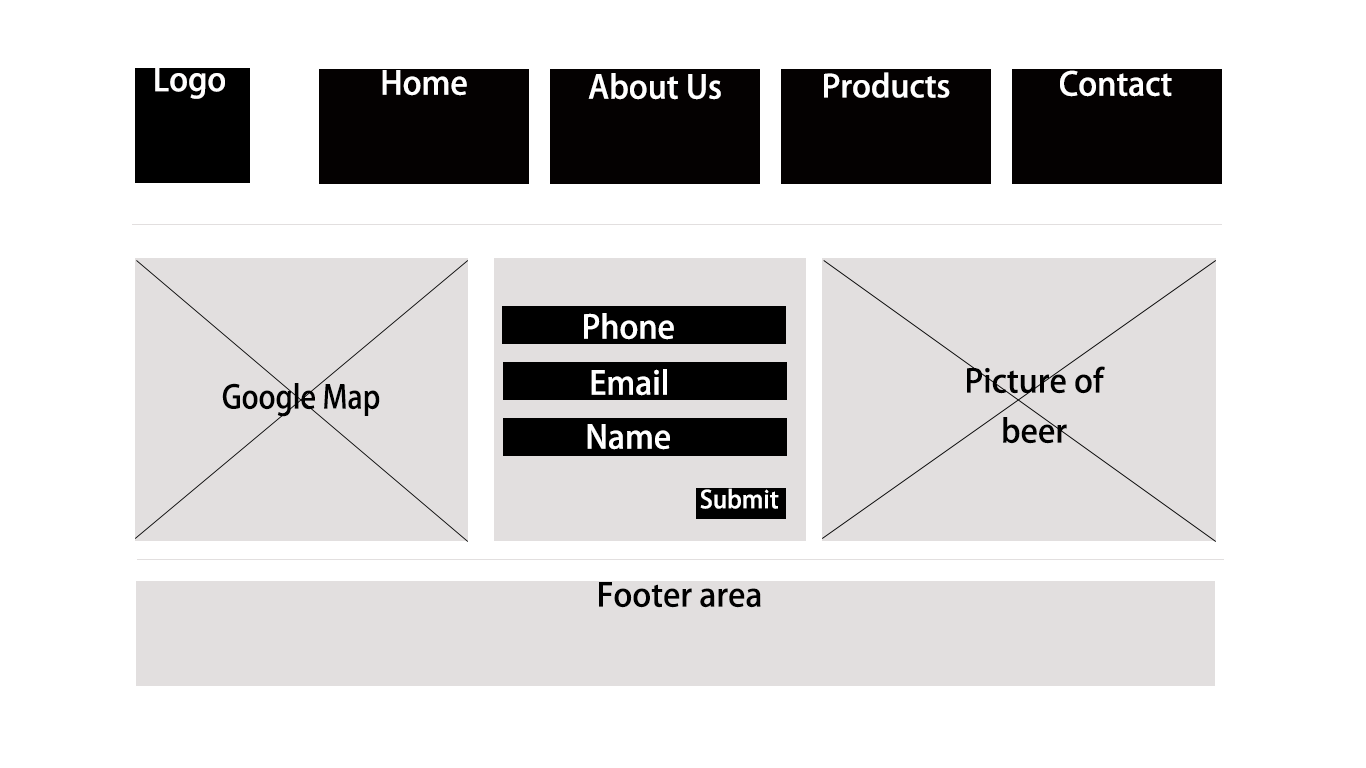
<style>
.page{position:relative;width:1366px;height:768px;background:#ffffff}
.page>*{position:absolute;margin:0}
.t1{font:32px "AdobeHeitiStd-Regular";color:#fffefe}
.t2{font:32px "AdobeHeitiStd-Regular";color:#ffffff}
.t3{font:30.7px "AdobeHeitiStd-Regular";color:#ffffff;scale:1.04 1}
.t4{font:32px/50px "AdobeHeitiStd-Regular";color:#000000}
.t5{font:32px "AdobeHeitiStd-Regular";color:#000000;scale:0.9 1}
.t6{font:24px "AdobeHeitiStd-Regular";color:#ffffff}
.t7{font:32px "AdobeHeitiStd-Regular";color:#000000}
</style>
<div class="page">
<p class="t1" style="left:155px;top:66px;width:70px;height:33px">Logo</p>
<p class="t2" style="left:382px;top:70px;width:85px;height:26px">Home</p>
<p class="t2" style="left:588px;top:73px;width:133px;height:27px">About Us</p>
<p class="t3" style="left:824px;top:72px;width:126px;height:26px">Products</p>
<p class="t2" style="left:1060px;top:70px;width:112px;height:27px">Contact</p>
<p class="t2" style="left:584px;top:313px;width:90px;height:27px">Phone</p>
<p class="t4" style="left:967px;top:366px;width:138px;height:78px;text-align:center">Picture of beer</p>
<p class="t2" style="left:591px;top:369px;width:76px;height:27px">Email</p>
<p class="t5" style="left:222px;top:383px;width:158px;height:34px">Google Map</p>
<p class="t2" style="left:587px;top:424px;width:83px;height:26px">Name</p>
<p class="t6" style="left:700px;top:488px;width:79px;height:21px">Submit</p>
<p class="t7" style="left:599px;top:582px;width:162px;height:26px">Footer area</p>
</div>
